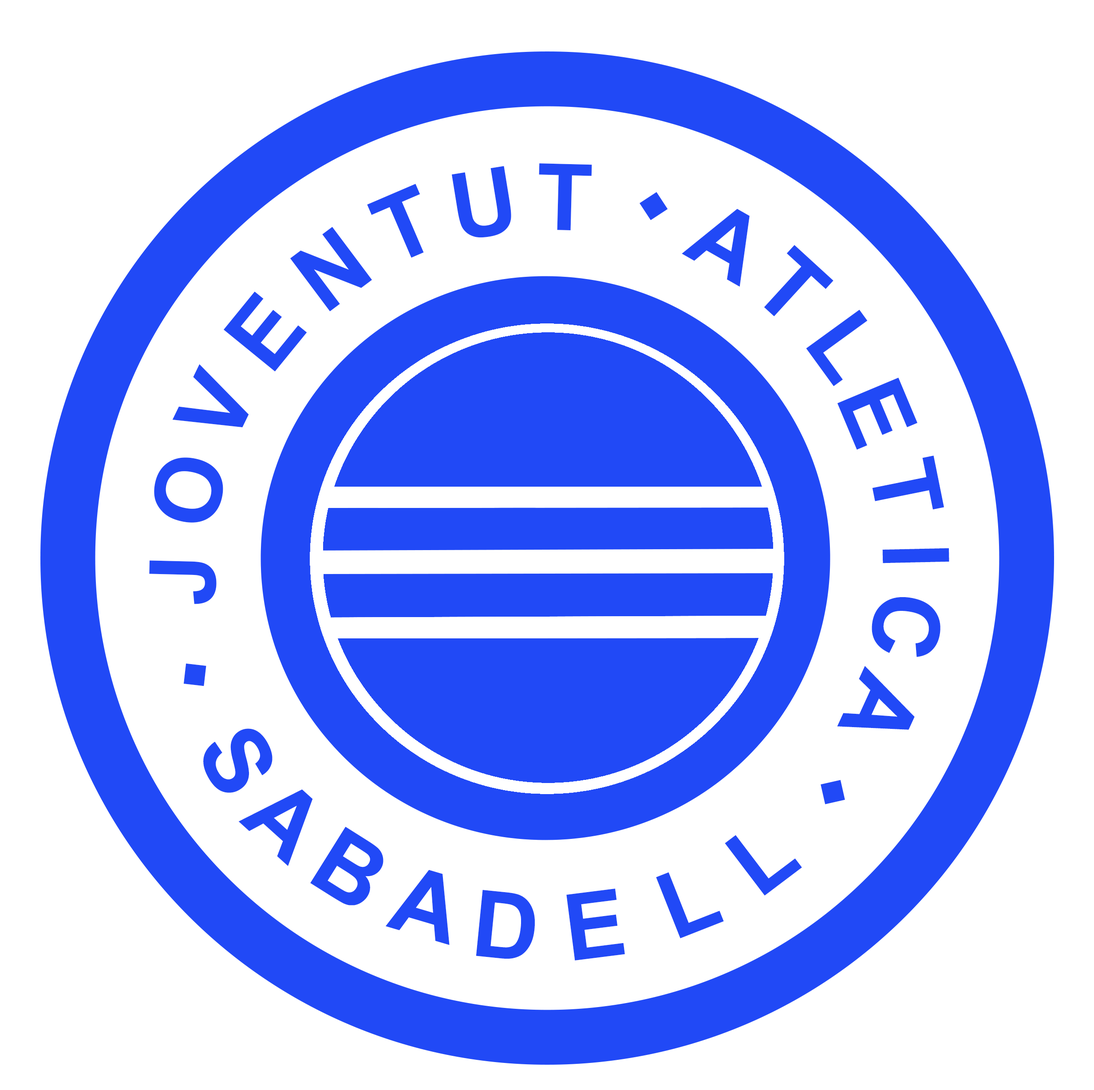
<style>
.page{position:relative;width:1094px;height:1090px;background:#ffffff}
.page>*{position:absolute;margin:0}
.t1{font:92.4px "Arial-BoldMT";letter-spacing:0.1em;color:#2149f6}
.t2{font:92.3px "Arial-BoldMT";letter-spacing:0.1em;color:#2149f6}
.t3{font:147.8px "Arial-BoldMT";letter-spacing:0.1em;color:#2149f6}
.t4{font:92.6px "Arial-BoldMT";letter-spacing:0.1em;color:#2149f6}
.t5{font:92.5px "Arial-BoldMT";letter-spacing:0.1em;color:#2149f6}
.t6{font:147.9px "Arial-BoldMT";letter-spacing:0.1em;color:#2149f6}
</style>
<div class="page">
<p class="t1" style="left:451px;top:166px;width:60px;height:72px;rotate:-9deg">U</p>
<p class="t2" style="left:539px;top:163px;width:53px;height:68px;rotate:1deg">T</p>
<p class="t1" style="left:367px;top:184px;width:57px;height:74px;rotate:-23deg">T</p>
<p class="t3" style="left:639px;top:192px;width:29px;height:29px;rotate:-33deg">·</p>
<p class="t1" style="left:682px;top:209px;width:67px;height:78px;rotate:30deg">A</p>
<p class="t1" style="left:290px;top:227px;width:82px;height:84px;rotate:-37deg">N</p>
<p class="t1" style="left:764px;top:245px;width:69px;height:71px;rotate:42deg">T</p>
<p class="t1" style="left:223px;top:292px;width:84px;height:80px;rotate:-51deg">E</p>
<p class="t1" style="left:806px;top:310px;width:61px;height:76px;rotate:54deg">L</p>
<p class="t1" style="left:172px;top:364px;width:77px;height:64px;rotate:-64deg">V</p>
<p class="t1" style="left:837px;top:378px;width:81px;height:72px;rotate:67deg">E</p>
<p class="t1" style="left:154px;top:457px;width:69px;height:66px;rotate:-79deg">O</p>
<p class="t4" style="left:872px;top:456px;width:72px;height:54px;rotate:79deg">T</p>
<p class="t5" style="left:882px;top:548px;width:67px;height:16px;rotate:89deg">I</p>
<p class="t1" style="left:149px;top:560px;width:68px;height:44px;rotate:-89deg">J</p>
<p class="t2" style="left:871px;top:597px;width:69px;height:60px;rotate:99deg">C</p>
<p class="t3" style="left:183px;top:663px;width:23px;height:23px;rotate:7deg">·</p>
<p class="t5" style="left:837px;top:666px;width:78px;height:64px;rotate:115deg">A</p>
<p class="t5" style="left:203px;top:729px;width:69px;height:64px;rotate:62deg">S</p>
<p class="t6" style="left:820px;top:780px;width:25px;height:24px;rotate:-13deg">·</p>
<p class="t1" style="left:238px;top:789px;width:75px;height:77px;rotate:42deg">A</p>
<p class="t5" style="left:310px;top:827px;width:73px;height:79px;rotate:32deg">B</p>
<p class="t1" style="left:725px;top:835px;width:77px;height:61px;rotate:-37deg">L</p>
<p class="t1" style="left:386px;top:870px;width:63px;height:75px;rotate:16deg">A</p>
<p class="t1" style="left:656px;top:872px;width:68px;height:66px;rotate:-21deg">L</p>
<p class="t1" style="left:476px;top:890px;width:59px;height:69px;rotate:6deg">D</p>
<p class="t1" style="left:566px;top:889px;width:59px;height:72px;rotate:-7deg">E</p>
</div>
